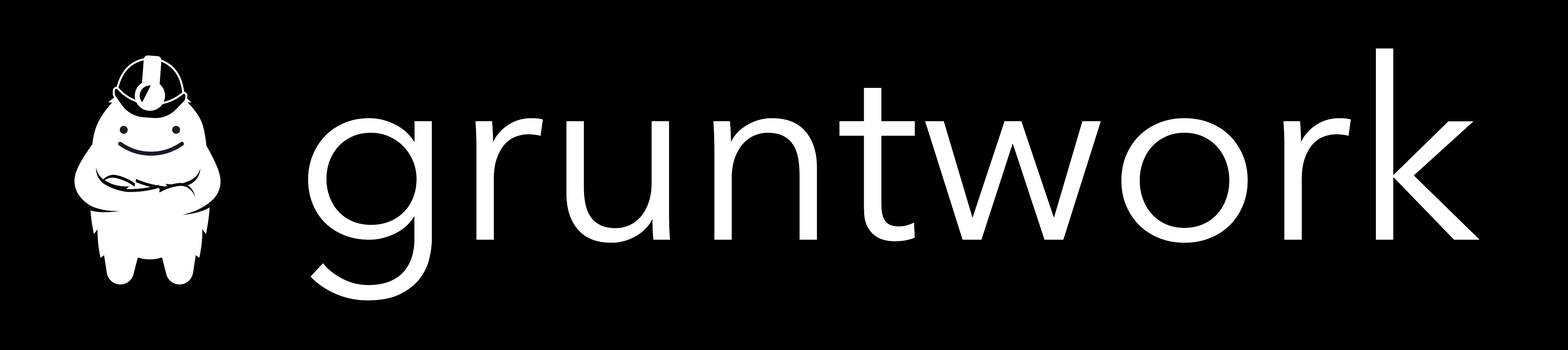
<style>
.page{position:relative;width:1568px;height:350px;background:#000000}
.page>*{position:absolute;margin:0}
.t1{font:252.8px "AvenirNext-Regular";color:#ffffff}
</style>
<div class="page">
<p class="t1" style="left:308px;top:48px;width:1172px;height:253px">gruntwork</p>
</div>
